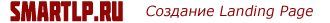
<style>
.page{position:relative;width:330px;height:23px;background:#ffffff}
.page>*{position:absolute;margin:0}
.t1{font:28.6px "Molot";color:#920505;text-transform:uppercase;scale:0.71 1}
.t2{font:14px "Verdana";color:#920505;font-style:italic}
</style>
<div class="page">
<p class="t1" style="left:10px;top:1px;width:113px;height:21px">Smartlp.ru</p>
<p class="t2" style="left:146px;top:5px;width:167px;height:14px">Создание Landing Page</p>
</div>
